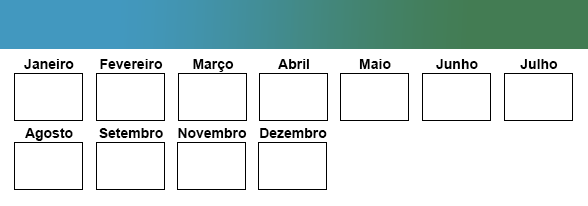
<style>
.page{position:relative;width:588px;height:206px;background:#ffffff}
.page>*{position:absolute;margin:0}
.t1{font:14px "Arial-BoldMT";color:#000000}
</style>
<div class="page">
<p class="t1" style="left:24px;top:59px;width:50px;height:10px">Janeiro</p>
<p class="t1" style="left:100px;top:59px;width:63px;height:10px">Fevereiro</p>
<p class="t1" style="left:193px;top:59px;width:41px;height:13px">Março</p>
<p class="t1" style="left:278px;top:59px;width:31px;height:10px">Abril</p>
<p class="t1" style="left:359px;top:59px;width:32px;height:10px">Maio</p>
<p class="t1" style="left:436px;top:59px;width:42px;height:10px">Junho</p>
<p class="t1" style="left:520px;top:59px;width:38px;height:10px">Julho</p>
<p class="t1" style="left:25px;top:128px;width:48px;height:13px">Agosto</p>
<p class="t1" style="left:99px;top:128px;width:64px;height:10px">Setembro</p>
<p class="t1" style="left:178px;top:128px;width:69px;height:10px">Novembro</p>
<p class="t1" style="left:260px;top:128px;width:67px;height:10px">Dezembro</p>
</div>
